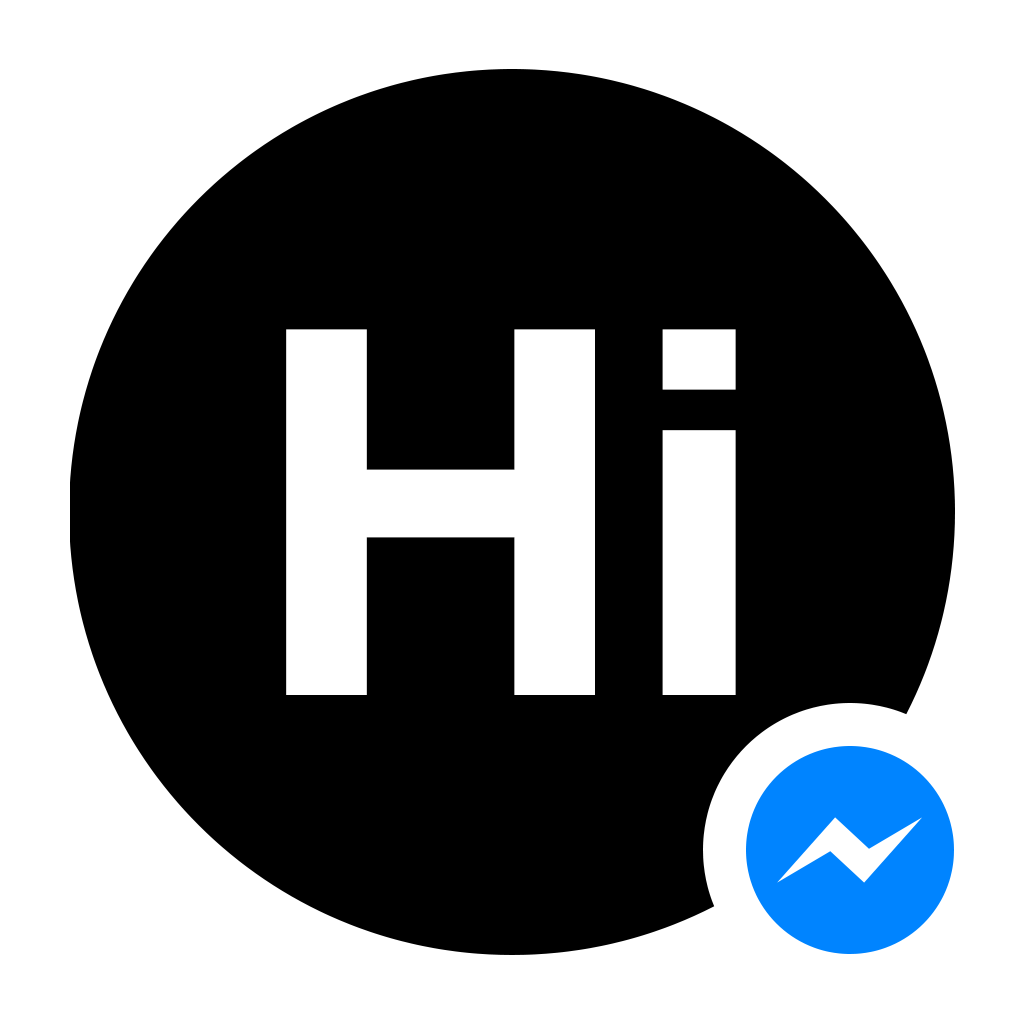
<style>
.page{position:relative;width:1024px;height:1024px;background:#ffffff}
.page>*{position:absolute;margin:0}
.t1{font:512px "HelveticaNeue-Bold";letter-spacing:0.005em;color:#ffffff}
</style>
<div class="page">
<p class="t1" style="left:286px;top:329px;width:450px;height:366px">Hi</p>
</div>
